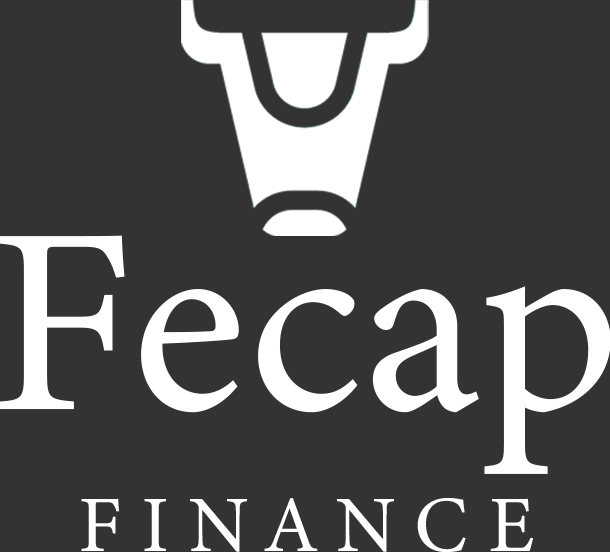
<style>
.page{position:relative;width:610px;height:552px;background:#333333}
.page>*{position:absolute;margin:0}
.t1{font:266px "MinionVariableConcept-Roman";color:#ffffff}
.t2{font:80px "MinionVariableConcept-Roman";color:#ffffff}
</style>
<div class="page">
<p class="t1" style="left:0px;top:235px;width:611px;height:239px">Fecap</p>
<p class="t2" style="left:81px;top:498px;width:452px;height:55px">F I N A N C E</p>
</div>
